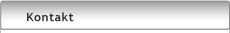
<style>
.page{position:relative;width:230px;height:33px;background:#ffffff}
.page>*{position:absolute;margin:0}
.t1{font:12px "TrebuchetMS-Bold";letter-spacing:0.05em;color:#333333}
</style>
<div class="page">
<p class="t1" style="left:27px;top:12px;width:47px;height:10px">Kontakt</p>
</div>
